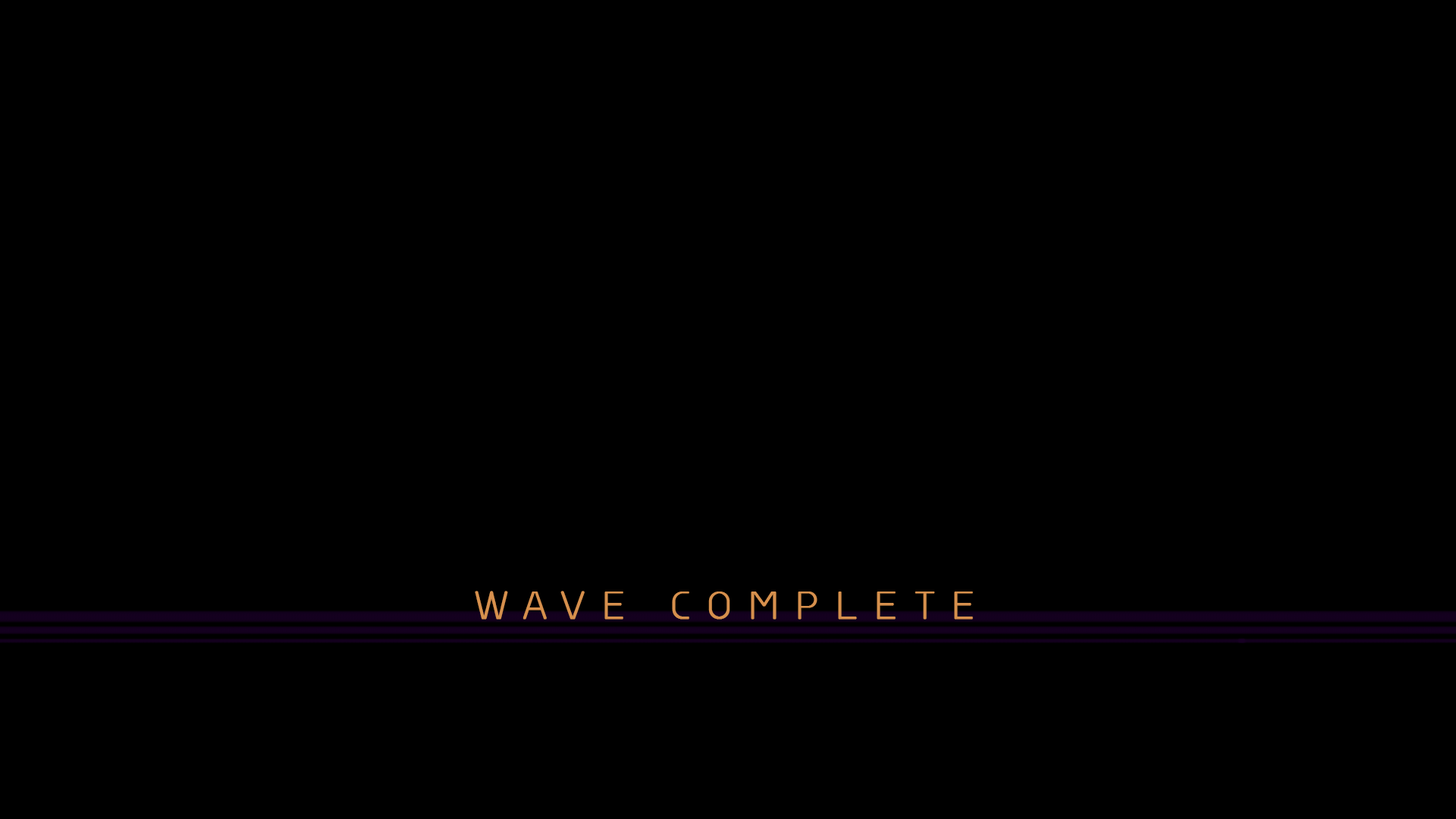
<style>
.page{position:relative;width:1456px;height:819px;background:#000000}
.page>*{position:absolute;margin:0}
.t1{font:36.4px "GreyscaleBasic";letter-spacing:0.5em;color:#d6904d;font-weight:bold}
</style>
<div class="page">
<p class="t1" style="left:475px;top:591px;width:498px;height:29px">WAVE COMPLETE</p>
</div>
